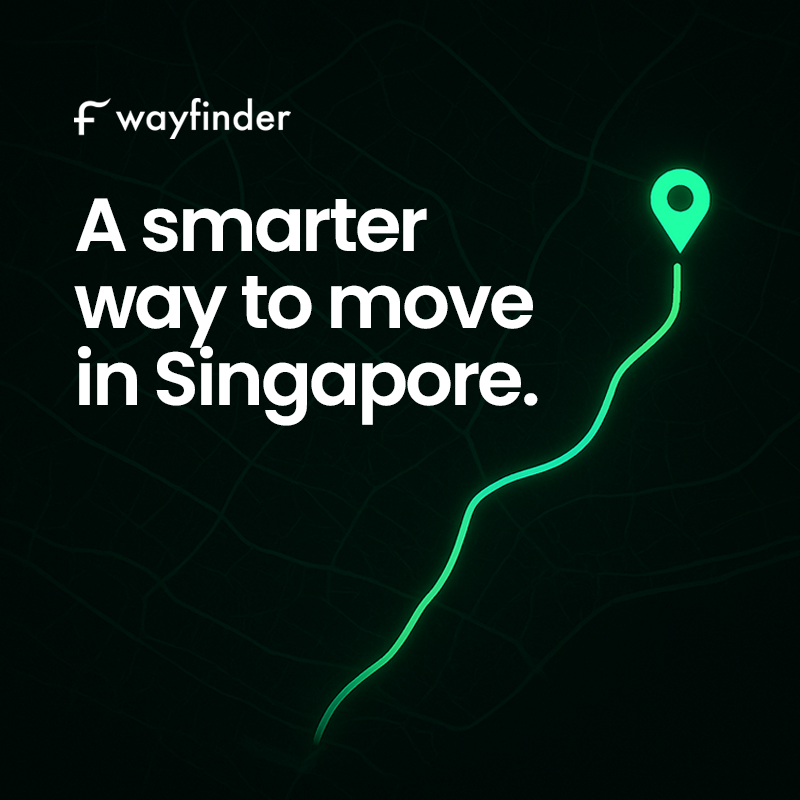
<style>
.page{position:relative;width:800px;height:800px}
.page>*{position:absolute;margin:0}
.t1{font:75.2px/77px "Poppins-SemiBold";letter-spacing:-0.04em;color:#ffffff}
</style>
<div class="page">
<p class="t1" style="left:74px;top:198px;width:464px;height:228px">A smarter<br>way to move<br>in Singapore.</p>
</div>
